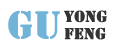
<style>
.page{position:relative;width:120px;height:48px;background:#ffffff}
.page>*{position:absolute;margin:0}
.t1{font:36px "StencilStd";color:#72b3d8;font-weight:bold}
.t2{font:14.7px/17.2px "StencilStd";color:#333333;font-weight:bold}
</style>
<div class="page">
<p class="t1" style="left:8px;top:10px;width:52px;height:29px">Gu</p>
<p class="t2" style="left:64px;top:10px;width:43px;height:30px">yong<br>feng</p>
</div>
